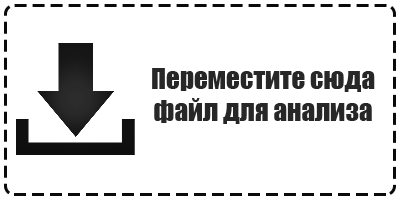
<style>
.page{position:relative;width:400px;height:200px;background:#ffffff}
.page>*{position:absolute;margin:0}
.t1{font:27px "Impact";color:#1e1e1e}
</style>
<div class="page">
<p class="t1" style="left:152px;top:68px;width:223px;height:56px;text-align:center;opacity:0.96">Переместите сюда<br>файл для анализа</p>
</div>
